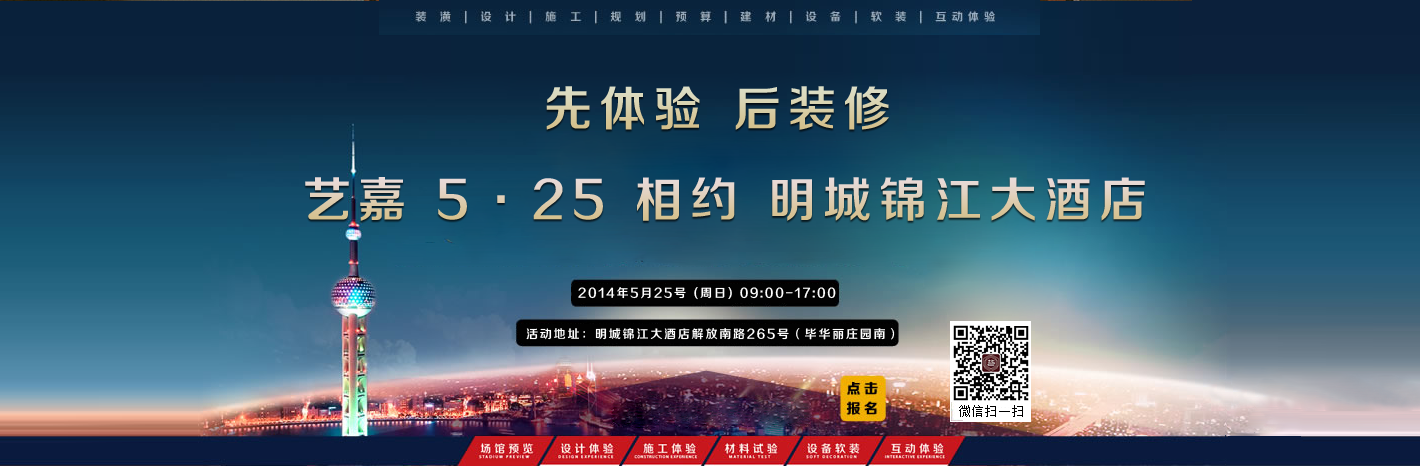
<style>
.page{position:relative;width:1420px;height:466px}
.page>*{position:absolute;margin:0}
.t1{font:48px "FZZZHONGJW--GB1-0";letter-spacing:0.15em}
.t2{font:12px "FZZZHONGJW--GB1-0";letter-spacing:0.15em;color:#ffffff}
</style>
<div class="page">
<p class="t1" style="left:546px;top:86px;width:343px;height:44px">先体验 后装修</p>
<p class="t1" style="left:305px;top:177px;width:840px;height:44px">艺嘉 5·25 相约 明城锦江大酒店</p>
<p class="t2" style="left:578px;top:287px;width:258px;height:13px">2014年5月25号 (周日) 09:00-17:00</p>
<p class="t2" style="left:526px;top:328px;width:369px;height:12px">活动地址：明城锦江大酒店解放南路265号（毕华丽庄园南）</p>
</div>
